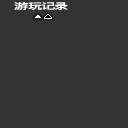
<style>
.page{position:relative;width:128px;height:128px;background:#333333}
.page>*{position:absolute;margin:0}
.t1{font:8.4px "DFKingGothicSC14-Semibold";letter-spacing:-0.075em;color:#ffffff;scale:1.71 1}
</style>
<div class="page">
<p class="t1" style="left:14px;top:2px;width:54px;height:8px">游玩记录</p>
</div>
